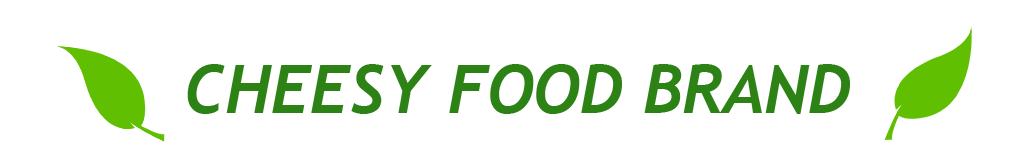
<style>
.page{position:relative;width:1035px;height:166px;background:#ffffff}
.page>*{position:absolute;margin:0}
.t1{font:66.7px "Trebuchet-BoldItalic";color:#2c8215}
</style>
<div class="page">
<p class="t1" style="left:187px;top:64px;width:663px;height:50px">CHEESY FOOD BRAND</p>
</div>
